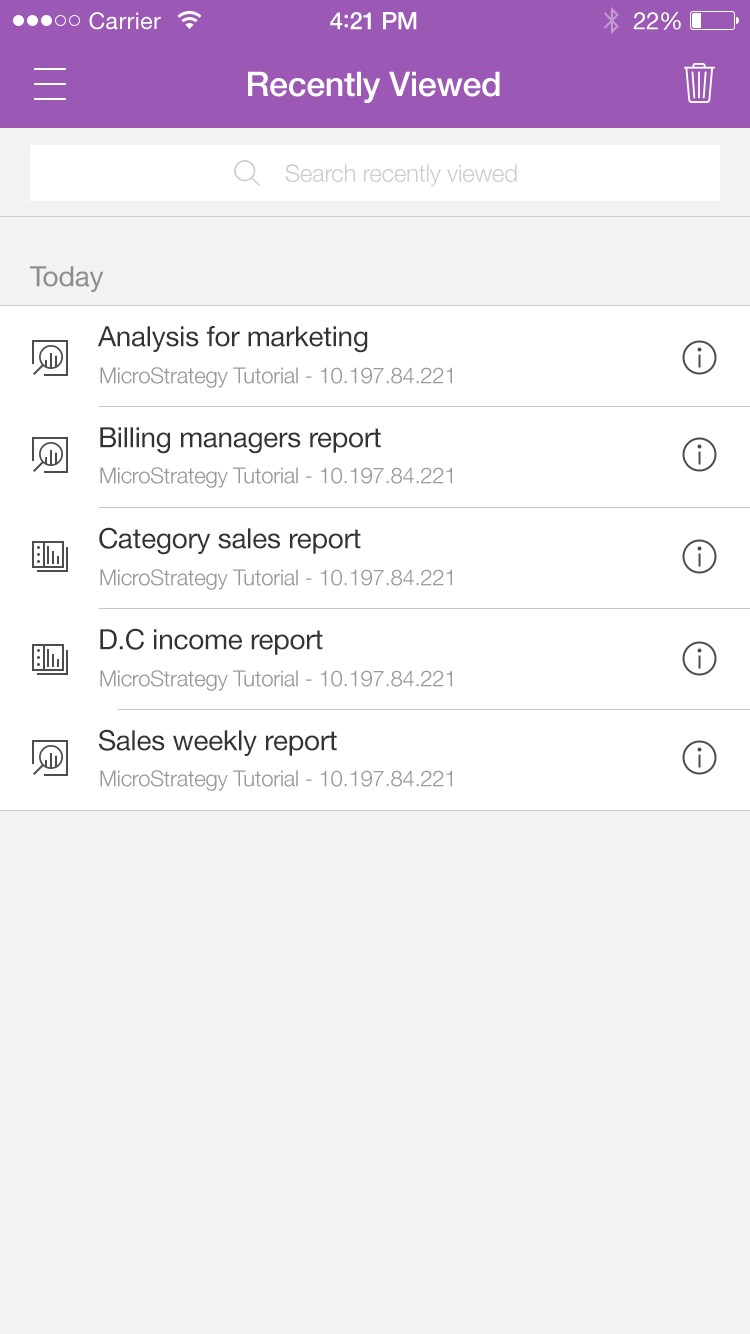
<style>
.page{position:relative;width:750px;height:1334px;background:#f2f2f2}
.page>*{position:absolute;margin:0}
.t1{font:23px "HelveticaNeue";letter-spacing:0.02em;color:#ffffff}
.t2{font:24px "HelveticaNeue-Medium";letter-spacing:-0.02em;color:#ffffff}
.t3{font:26px "Avenir-Medium";letter-spacing:-0.02em;color:#ffffff}
.t4{font:24px "HelveticaNeue";letter-spacing:-0.02em;color:#ffffff}
.t5{font:34px "HelveticaNeue-Medium";letter-spacing:-0.01em;color:#ffffff}
.t6{font:24px "HelveticaNeue-Light";letter-spacing:-0.01em;color:#cccccc}
.t7{font:28px "HelveticaNeue";letter-spacing:-0.01em;color:#8c8c8c}
.t8{font:28px "HelveticaNeue";letter-spacing:-0.01em;color:#333333}
.t9{font:22px "HelveticaNeue-Light";letter-spacing:-0.01em;color:#999999}
</style>
<div class="page">
<p class="t1" style="left:89px;top:12px;width:72px;height:18px">Carrier</p>
<p class="t2" style="left:330px;top:12px;width:87px;height:18px">4<span class="t3">:</span>21 PM</p>
<p class="t4" style="left:633px;top:12px;width:48px;height:18px">22%</p>
<p class="t5" style="left:248px;top:71px;width:252px;height:32px">Recently Viewed</p>
<p class="t6" style="left:285px;top:164px;width:232px;height:23px">Search recently viewed</p>
<p class="t7" style="left:30px;top:266px;width:74px;height:26px">Today</p>
<p class="t8" style="left:97px;top:326px;width:271px;height:27px">Analysis for marketing</p>
<p class="t9" style="left:100px;top:367px;width:352px;height:21px">MicroStrategy Tutorial - 10.197.84.221</p>
<p class="t8" style="left:100px;top:427px;width:281px;height:27px">Billing managers report</p>
<p class="t9" style="left:100px;top:467px;width:352px;height:21px">MicroStrategy Tutorial - 10.197.84.221</p>
<p class="t8" style="left:99px;top:527px;width:262px;height:28px">Category sales report</p>
<p class="t9" style="left:100px;top:569px;width:352px;height:21px">MicroStrategy Tutorial - 10.197.84.221</p>
<p class="t8" style="left:100px;top:628px;width:223px;height:27px">D.C income report</p>
<p class="t9" style="left:100px;top:670px;width:352px;height:21px">MicroStrategy Tutorial - 10.197.84.221</p>
<p class="t8" style="left:99px;top:729px;width:238px;height:27px">Sales weekly report</p>
<p class="t9" style="left:100px;top:770px;width:352px;height:21px">MicroStrategy Tutorial - 10.197.84.221</p>
</div>
